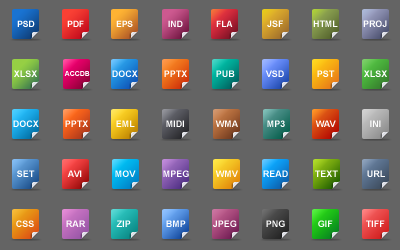
<style>
.page{position:relative;width:400px;height:250px;background:#646464}
.page>*{position:absolute;margin:0}
.t1{font:8.6px "Arial-BoldMT";color:#ffffff}
.t2{font:9px "Arial-BoldMT";color:#ffffff}
.t3{font:7px "Arial-BoldMT";color:#ffffff}
</style>
<div class="page">
<p class="t1" style="left:17px;top:20px;width:18px;height:7px">PSD</p>
<p class="t1" style="left:67px;top:20px;width:17px;height:7px">PDF</p>
<p class="t1" style="left:116px;top:20px;width:17px;height:7px">EPS</p>
<p class="t1" style="left:168px;top:20px;width:15px;height:7px">IND</p>
<p class="t1" style="left:216px;top:20px;width:17px;height:7px">FLA</p>
<p class="t2" style="left:267px;top:20px;width:16px;height:7px">JSF</p>
<p class="t2" style="left:313px;top:20px;width:25px;height:7px">HTML</p>
<p class="t2" style="left:363px;top:20px;width:24px;height:7px">PROJ</p>
<p class="t2" style="left:14px;top:70px;width:23px;height:7px">XLSX</p>
<p class="t3" style="left:64px;top:71px;width:26px;height:5px">ACCDB</p>
<p class="t2" style="left:112px;top:70px;width:26px;height:7px">DOCX</p>
<p class="t2" style="left:164px;top:70px;width:23px;height:7px">PPTX</p>
<p class="t2" style="left:216px;top:70px;width:19px;height:7px">PUB</p>
<p class="t2" style="left:265px;top:70px;width:19px;height:7px">VSD</p>
<p class="t2" style="left:317px;top:70px;width:18px;height:7px">PST</p>
<p class="t2" style="left:364px;top:70px;width:23px;height:7px">XLSX</p>
<p class="t2" style="left:13px;top:120px;width:26px;height:7px">DOCX</p>
<p class="t2" style="left:65px;top:120px;width:23px;height:7px">PPTX</p>
<p class="t2" style="left:116px;top:120px;width:19px;height:7px">EML</p>
<p class="t2" style="left:166px;top:120px;width:18px;height:7px">MIDI</p>
<p class="t2" style="left:215px;top:120px;width:23px;height:7px">WMA</p>
<p class="t2" style="left:267px;top:120px;width:18px;height:7px">MP3</p>
<p class="t2" style="left:315px;top:120px;width:21px;height:7px">WAV</p>
<p class="t2" style="left:370px;top:120px;width:11px;height:7px">INI</p>
<p class="t2" style="left:17px;top:170px;width:18px;height:7px">SET</p>
<p class="t2" style="left:67px;top:170px;width:15px;height:7px">AVI</p>
<p class="t2" style="left:115px;top:170px;width:21px;height:7px">MOV</p>
<p class="t2" style="left:163px;top:170px;width:26px;height:7px">MPEG</p>
<p class="t2" style="left:215px;top:170px;width:23px;height:7px">WMV</p>
<p class="t2" style="left:263px;top:170px;width:25px;height:7px">READ</p>
<p class="t2" style="left:315px;top:170px;width:23px;height:7px">TEXT</p>
<p class="t2" style="left:367px;top:170px;width:18px;height:7px">URL</p>
<p class="t2" style="left:16px;top:220px;width:18px;height:7px">CSS</p>
<p class="t2" style="left:66px;top:220px;width:20px;height:7px">RAR</p>
<p class="t2" style="left:116px;top:220px;width:15px;height:7px">ZIP</p>
<p class="t2" style="left:166px;top:220px;width:20px;height:7px">BMP</p>
<p class="t2" style="left:213px;top:220px;width:24px;height:7px">JPEG</p>
<p class="t2" style="left:266px;top:220px;width:19px;height:7px">PNG</p>
<p class="t2" style="left:318px;top:220px;width:15px;height:7px">GIF</p>
<p class="t2" style="left:366px;top:220px;width:19px;height:7px">TIFF</p>
</div>
